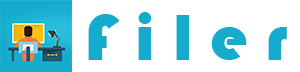
<style>
.page{position:relative;width:300px;height:72px;background:#ffffff}
.page>*{position:absolute;margin:0}
.t1{font:68px "Bauhaus93";letter-spacing:0.26em;color:#15abcc}
</style>
<div class="page">
<p class="t1" style="left:88px;top:12px;width:199px;height:48px">Filer</p>
</div>
